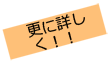
<style>
.page{position:relative;width:110px;height:64px;background:#ffffff}
.page>*{position:absolute;margin:0}
.t1{font:15.2px "Meiryo";color:#050300;text-transform:uppercase}
.t2{font:15.2px/12.6px "Meiryo";color:#050300;text-transform:uppercase}
</style>
<div class="page">
<p class="t1" style="left:26px;top:13px;width:59px;height:25px;rotate:-15deg">更に詳し</p>
<p class="t2" style="left:36px;top:31px;width:37px;height:19px;rotate:-15deg">く！！<br>く！！</p>
</div>
